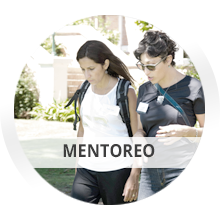
<style>
.page{position:relative;width:220px;height:220px;background:#ffffff}
.page>*{position:absolute;margin:0}
.t1{font:18px "OpenSans-Bold";letter-spacing:0.005em;color:#3d3d3d;scale:0.9 1}
</style>
<div class="page">
<p class="t1" style="left:63px;top:144px;width:92px;height:14px">MENTOREO</p>
</div>
